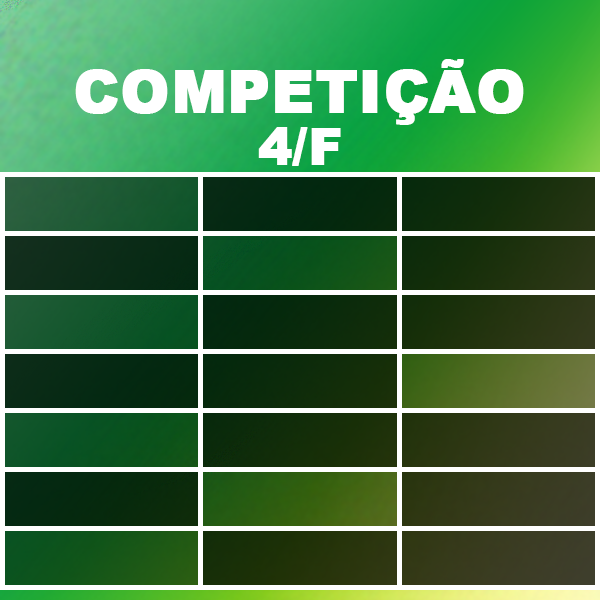
<style>
.page{position:relative;width:600px;height:600px}
.page>*{position:absolute;margin:0}
.t1{font:58.3px "Arial-Black";color:#ffffff;text-transform:uppercase;font-weight:bold}
.t2{font:50px "Arial-Black";color:#ffffff;text-transform:uppercase;font-weight:bold}
</style>
<div class="page">
<p class="t1" style="left:75px;top:59px;width:449px;height:66px">Competição</p>
<p class="t2" style="left:258px;top:127px;width:83px;height:39px">4/f</p>
</div>
